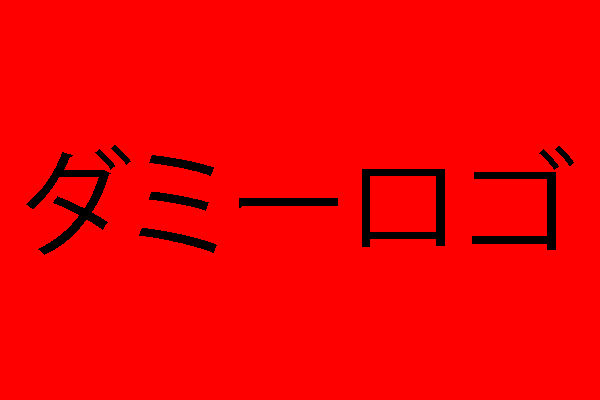
<style>
.page{position:relative;width:600px;height:400px;background:#ff0000}
.page>*{position:absolute;margin:0}
.t1{font:118.7px "KozGoPr6N-Regular";color:#000000}
</style>
<div class="page">
<p class="t1" style="left:26px;top:145px;width:548px;height:110px">ダミーロゴ</p>
</div>
